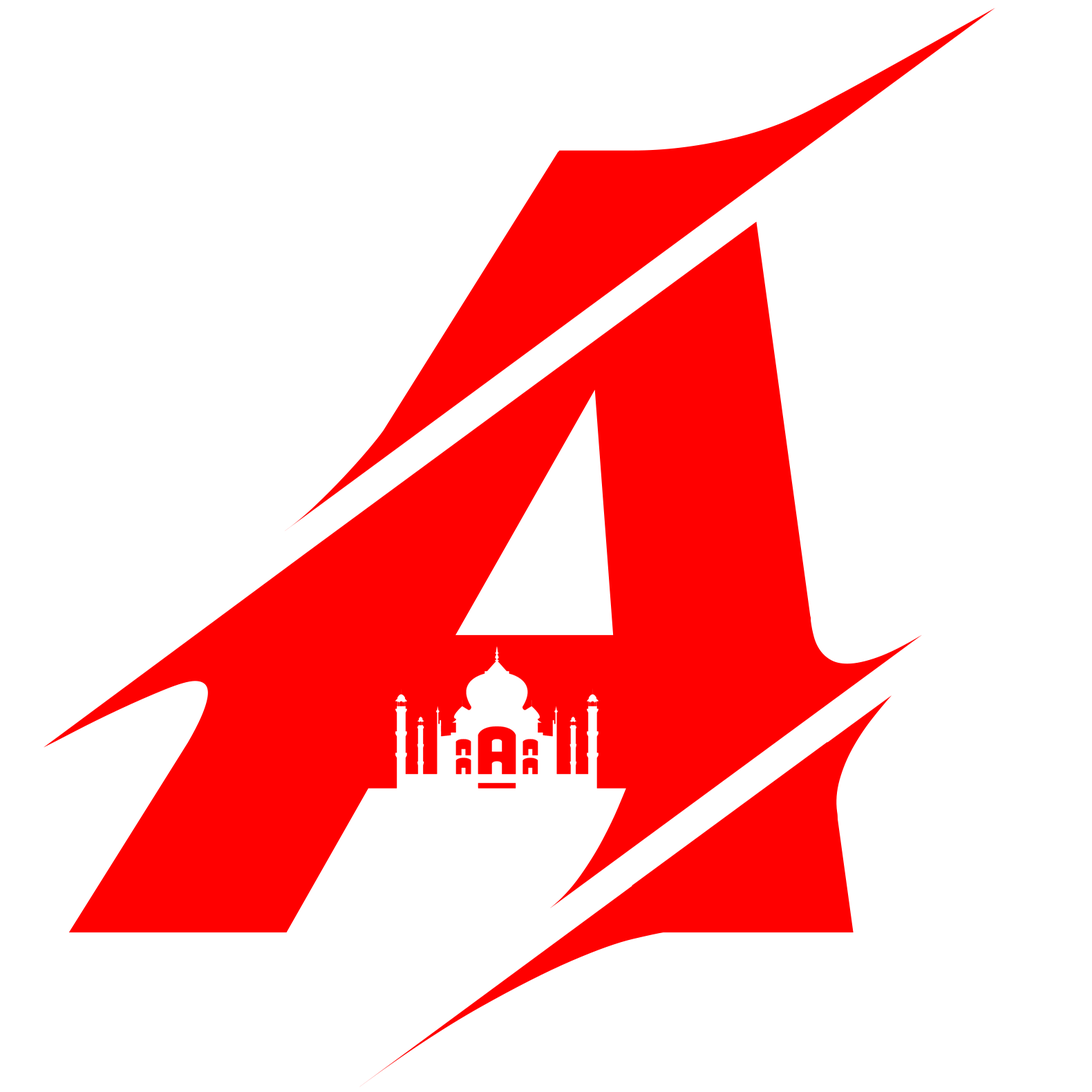
<style>
.page{position:relative;width:1092px;height:1092px;background:#ffffff}
.page>*{position:absolute;margin:0}
.t1{font:1105.3px "Facon";color:#ff0000}
</style>
<div class="page">
<p class="t1" style="left:44px;top:8px;width:951px;height:1079px">A</p>
</div>
